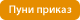
<style>
.page{position:relative;width:80px;height:20px;background:#e68d00}
.page>*{position:absolute;margin:0}
.t1{font:11px "MyriadPro-Semibold";color:#ffffff}
</style>
<div class="page">
<p class="t1" style="left:9px;top:5px;width:63px;height:11px">Пуни приказ</p>
</div>
